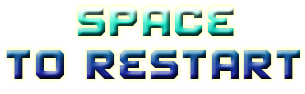
<style>
.page{position:relative;width:305px;height:94px;background:#ffffff}
.page>*{position:absolute;margin:0}
.t1{font:36px "FearFactor"}
.t2{font:30px "FearFactor"}
</style>
<div class="page">
<p class="t1" style="left:6px;top:7px;width:294px;height:72px"><span class="t2">       </span>     SPACE <br>       TO restart</p>
</div>
